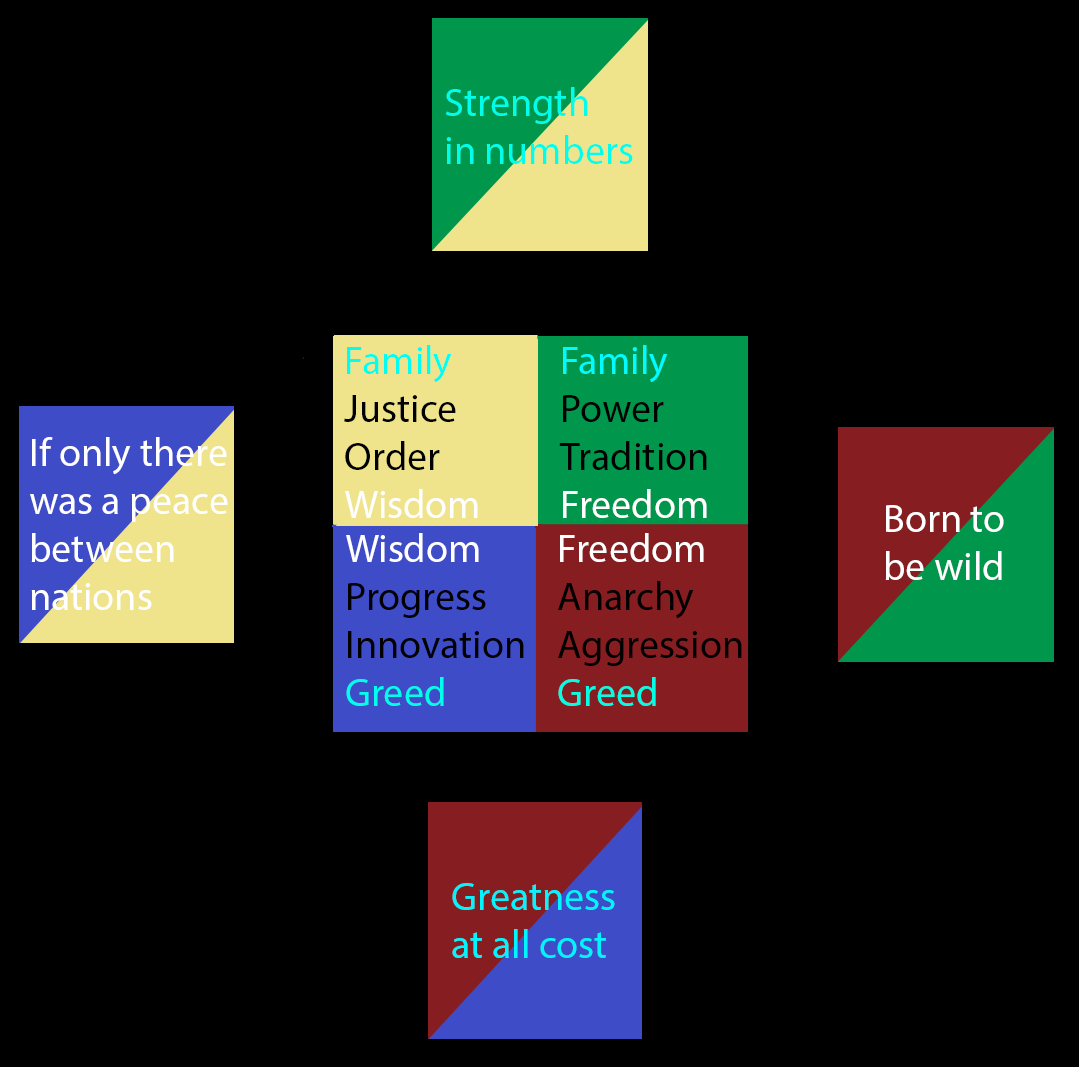
<style>
.page{position:relative;width:1079px;height:1067px;background:#000000}
.page>*{position:absolute;margin:0}
.t1{font:40px "MyriadPro-Regular";color:#00ffea}
.t2{font:40px "MyriadPro-Regular";color:#000000}
.t3{font:40px "MyriadPro-Regular";color:#00fff0}
.t4{font:40px "MyriadPro-Regular";color:#ffffff}
.t5{font:40px "MyriadPro-Regular";color:#00fcff}
.t6{font:40px "MyriadPro-Regular";color:#00ffe4}
.t7{font:40px "MyriadPro-Regular";color:#00f6ff}
</style>
<div class="page">
<p class="t1" style="left:446px;top:87px;width:187px;height:77px">Strength<br>in numbers</p>
<p class="t2" style="left:344px;top:345px;width:134px;height:173px"><span class="t3">Family<br></span>Justice<br>Order<br><span class="t4">Wisdom</span></p>
<p class="t2" style="left:559px;top:345px;width:148px;height:173px"><span class="t5">Family<br></span>Power<br>Tradition<br><span class="t4">Freedom</span></p>
<p class="t4" style="left:30px;top:437px;width:198px;height:173px">If only there<br>was a peace<br>between<br>nations</p>
<p class="t4" style="left:885px;top:505px;width:119px;height:75px">Born to<br>be wild</p>
<p class="t2" style="left:346px;top:533px;width:178px;height:173px"><span class="t4">Wisdom<br></span>Progress<br>Innovation<br><span class="t1">Greed</span></p>
<p class="t2" style="left:558px;top:533px;width:184px;height:173px"><span class="t4">Freedom<br></span>Anarchy<br>Aggression<br><span class="t6">Greed</span></p>
<p class="t7" style="left:452px;top:883px;width:163px;height:75px">Greatness<br>at all cost</p>
</div>
